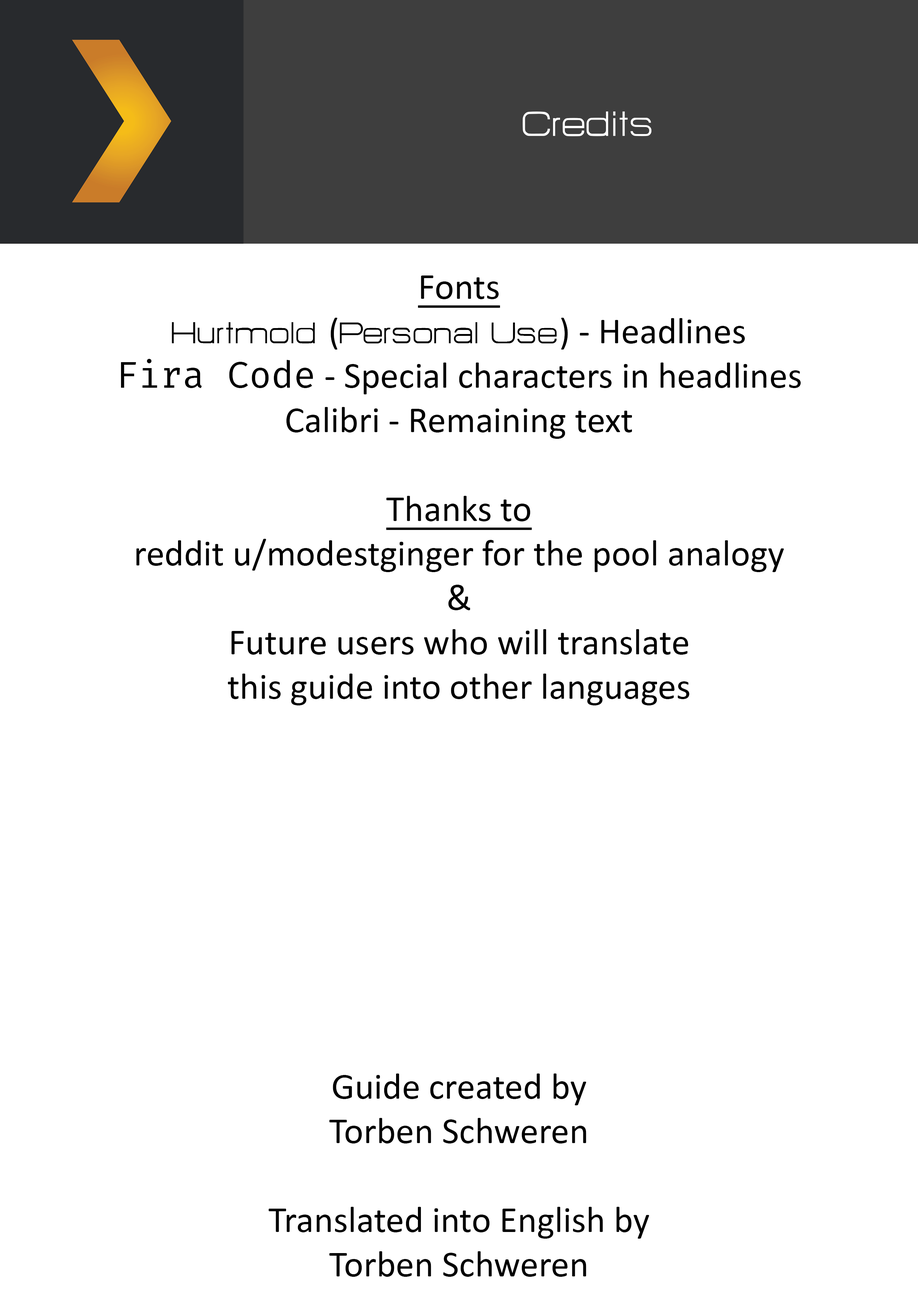
<style>
.page{position:relative;width:918px;height:1299px;background:#ffffff}
.page>*{position:absolute;margin:0}
.t1{font:43.2px "HURTMOLDPersonalUse-Regular";color:#ffffff}
.t2{font:37px "Calibri";color:#000000}
.t3{font:37px "Calibri";color:#000000;text-decoration:underline}
.t4{font:37px "HURTMOLDPersonalUse-Regular";color:#000000}
.t5{font:37px "FiraCode-Regular";color:#000000}
</style>
<div class="page">
<p class="t1" style="left:523px;top:111px;width:129px;height:25px">Credits</p>
<p class="t2" style="left:121px;top:275px;width:680px;height:1002px;text-align:center"><span class="t3">Fonts<br></span><span class="t4">Hurtmold </span>(<span class="t4">Personal Use</span>) - Headlines<br><span class="t5">Fira Code</span> - Special characters in headlines<br>Calibri - Remaining text<br><br><span class="t3">Thanks to<br></span>reddit u/modestginger for the pool analogy<br>&amp;<br>Future users who will translate<br>this guide into other languages<br><br><br><br><br><br><br><br><br>Guide created by<br>Torben Schweren<br><br>Translated into English by<br>Torben Schweren</p>
</div>
